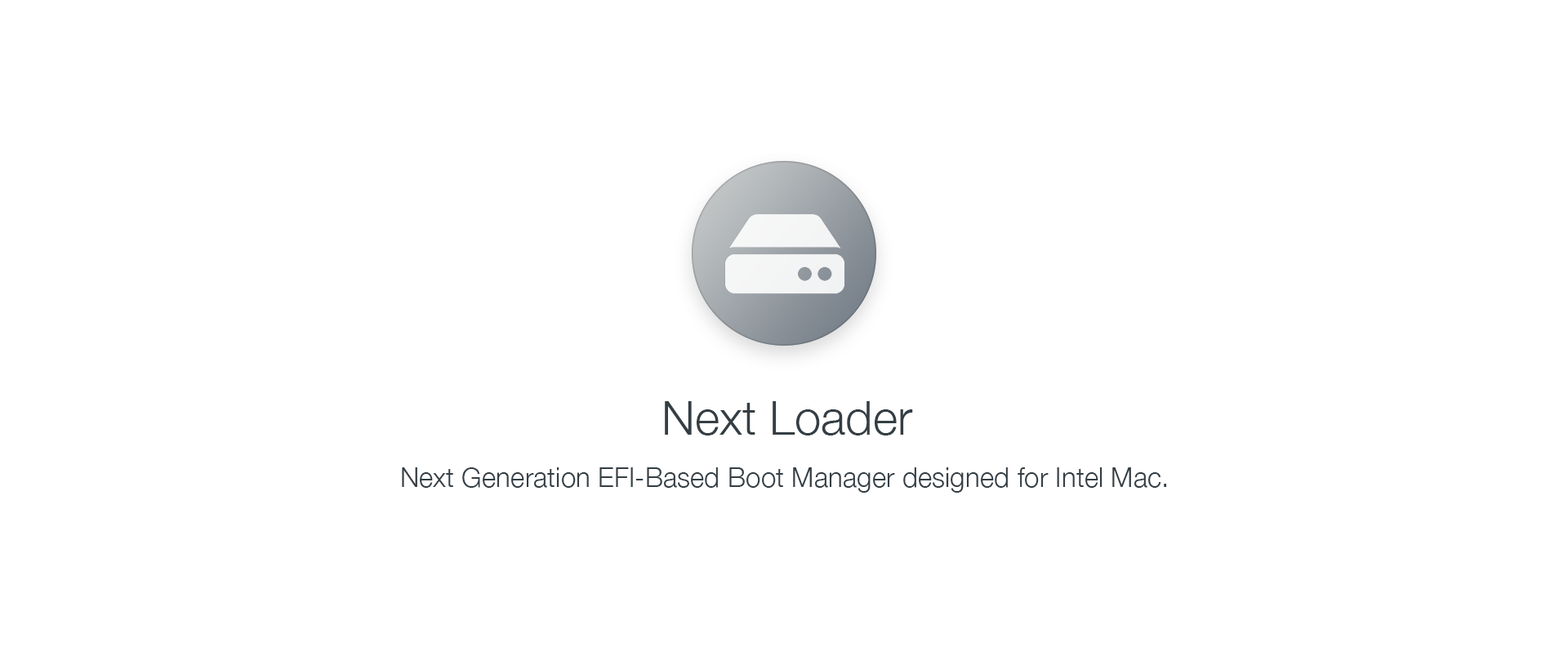
<style>
.page{position:relative;width:1568px;height:661px;background:#ffffff}
.page>*{position:absolute;margin:0}
.t1{font:47.3px "HelveticaNeue-Light";color:#343e44}
.t2{font:27.2px "HelveticaNeue-Light";color:#343e44}
</style>
<div class="page">
<p class="t1" style="left:665px;top:401px;width:248px;height:34px">Next Loader</p>
<p class="t2" style="left:402px;top:467px;width:765px;height:25px">Next Generation EFI-Based Boot Manager designed for Intel Mac.</p>
</div>
